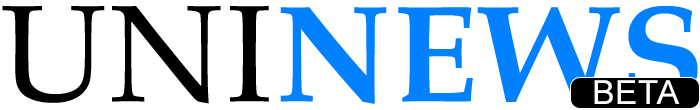
<style>
.page{position:relative;width:700px;height:110px;background:#ffffff}
.page>*{position:absolute;margin:0}
.t1{font:137.5px "BookAntiqua-Bold";letter-spacing:0.02em;color:#0180ff}
.t2{font:137.5px "BookAntiqua";letter-spacing:0.02em;color:#000000}
.t3{font:33.3px "ArialMT";letter-spacing:0.02em;color:#ffffff}
</style>
<div class="page">
<p class="t1" style="left:2px;top:6px;width:696px;height:98px"><span class="t2">UNI</span>NEWS</p>
<p class="t3" style="left:594px;top:80px;width:86px;height:24px">BETA</p>
</div>
